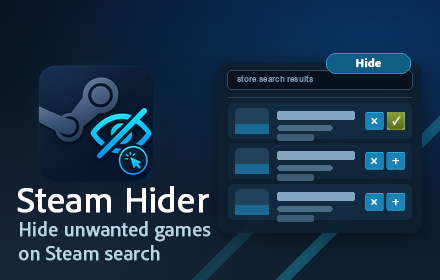
<style>
.page{position:relative;width:440px;height:280px}
.page>*{position:absolute;margin:0}
.t1{font:12px "AdobeClean-Bold";color:#ffffff;font-weight:bold}
.t2{font:12px "MinionPro-BoldCn";color:#ffffff;font-weight:bold}
.t3{font:36px "AdobeClean-Regular";color:#ffffff;font-weight:bold}
.t4{font:20px "AdobeClean-Regular";color:#b9d5e8;font-weight:bold}
</style>
<div class="page">
<p class="t1" style="left:356px;top:58px;width:25px;height:10px">Hide</p>
<p class="t2" style="left:371px;top:118px;width:7px;height:6px">×</p>
<p class="t2" style="left:392px;top:116px;width:9px;height:10px">✓</p>
<p class="t2" style="left:371px;top:158px;width:6px;height:6px">×</p>
<p class="t2" style="left:392px;top:158px;width:7px;height:7px">+</p>
<p class="t3" style="left:17px;top:186px;width:192px;height:27px">Steam Hider</p>
<p class="t2" style="left:371px;top:199px;width:6px;height:6px">×</p>
<p class="t2" style="left:392px;top:199px;width:7px;height:7px">+</p>
<p class="t4" style="left:19px;top:221px;width:192px;height:40px">Hide unwanted games <br>on Steam search</p>
</div>
